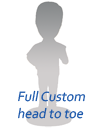
<style>
.page{position:relative;width:100px;height:128px;background:#ffffff}
.page>*{position:absolute;margin:0}
.t1{font:14px/17px "Corbel";color:#1956aa;font-style:italic}
</style>
<div class="page">
<p class="t1" style="left:18px;top:90px;width:68px;height:29px">Full Custom<br>head to toe</p>
</div>
